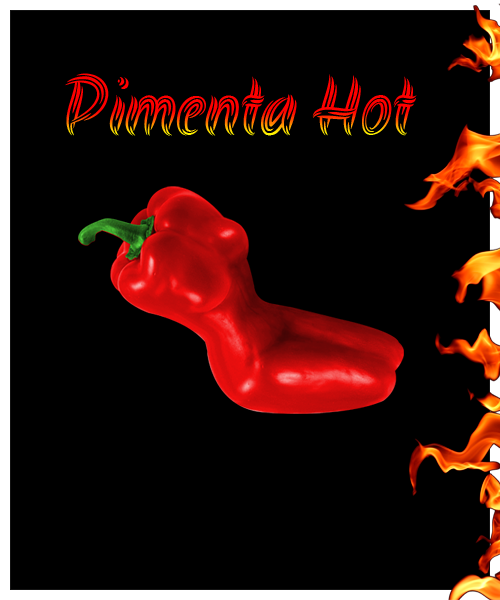
<style>
.page{position:relative;width:500px;height:600px;background:#000000}
.page>*{position:absolute;margin:0}
.t1{font:83.3px "Akronim-Regular"}
</style>
<div class="page">
<p class="t1" style="left:65px;top:73px;width:352px;height:63px">Pimenta Hot</p>
</div>
